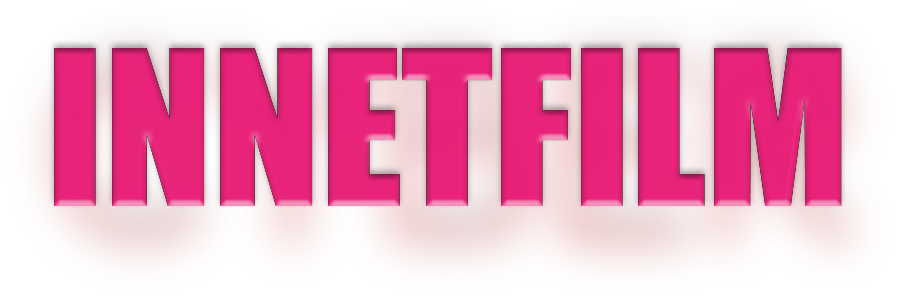
<style>
.page{position:relative;width:898px;height:301px}
.page>*{position:absolute;margin:0}
.t1{font:200px "Impact";color:#e71d75}
</style>
<div class="page">
<p class="t1" style="left:54px;top:48px;width:788px;height:158px;opacity:0.97">INNETFILM</p>
</div>
